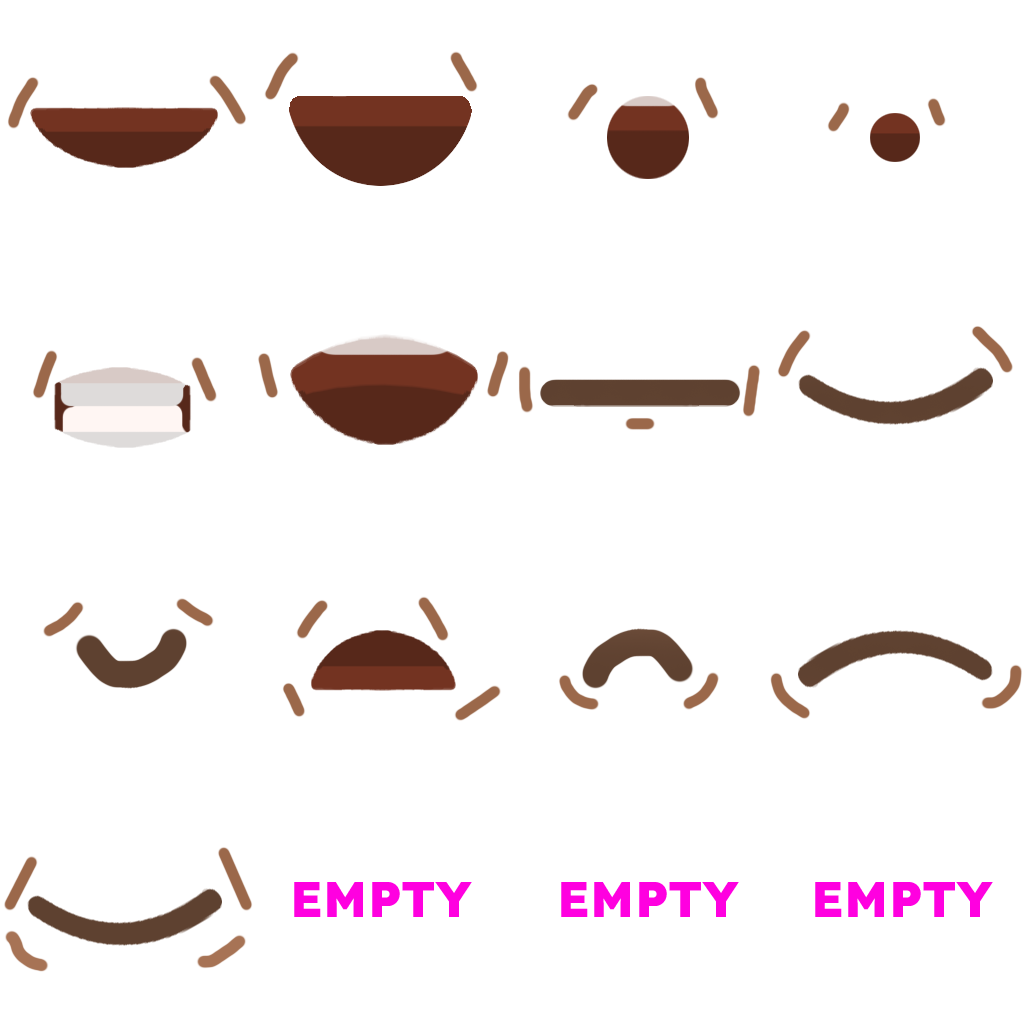
<style>
.page{position:relative;width:1024px;height:1024px;background:#ffffff}
.page>*{position:absolute;margin:0}
.t1{font:50px "Lexend-ExtraBold";color:#ff00e0}
</style>
<div class="page">
<p class="t1" style="left:294px;top:882px;width:178px;height:35px">EMPTY</p>
<p class="t1" style="left:561px;top:882px;width:178px;height:35px">EMPTY</p>
<p class="t1" style="left:815px;top:882px;width:178px;height:35px">EMPTY</p>
</div>
